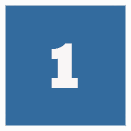
<style>
.page{position:relative;width:131px;height:131px;background:#336b9e}
.page>*{position:absolute;margin:0}
.t1{font:64px "Rockwell-ExtraBold";color:#f9f6f6}
</style>
<div class="page">
<p class="t1" style="left:51px;top:43px;width:27px;height:45px">1</p>
</div>
